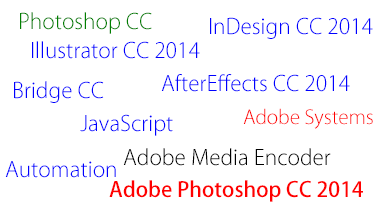
<style>
.page{position:relative;width:384px;height:216px;background:#ffffff}
.page>*{position:absolute;margin:0}
.t1{font:21px "KozGoPro-Light";color:#008000}
.t2{font:21px "KozGoPro-Light";color:#0000ff}
.t3{font:19px "KozGoPro-Light";color:#ff0000}
.t4{font:21px "KozGoPro-Light";color:#000000}
.t5{font:21px "KozGoPro-Medium";color:#ff0000}
</style>
<div class="page">
<p class="t1" style="left:20px;top:12px;width:132px;height:22px">Photoshop CC</p>
<p class="t2" style="left:210px;top:17px;width:163px;height:22px">InDesign CC 2014</p>
<p class="t2" style="left:32px;top:41px;width:168px;height:18px">Illustrator CC 2014</p>
<p class="t2" style="left:161px;top:74px;width:189px;height:18px">AfterEffects CC 2014</p>
<p class="t2" style="left:14px;top:81px;width:90px;height:22px">Bridge CC</p>
<p class="t3" style="left:243px;top:108px;width:130px;height:21px">Adobe Systems</p>
<p class="t2" style="left:80px;top:114px;width:93px;height:22px">JavaScript</p>
<p class="t4" style="left:123px;top:148px;width:208px;height:18px">Adobe Media Encoder</p>
<p class="t2" style="left:5px;top:161px;width:111px;height:17px">Automation</p>
<p class="t5" style="left:109px;top:180px;width:254px;height:22px">Adobe Photoshop CC 2014</p>
</div>
